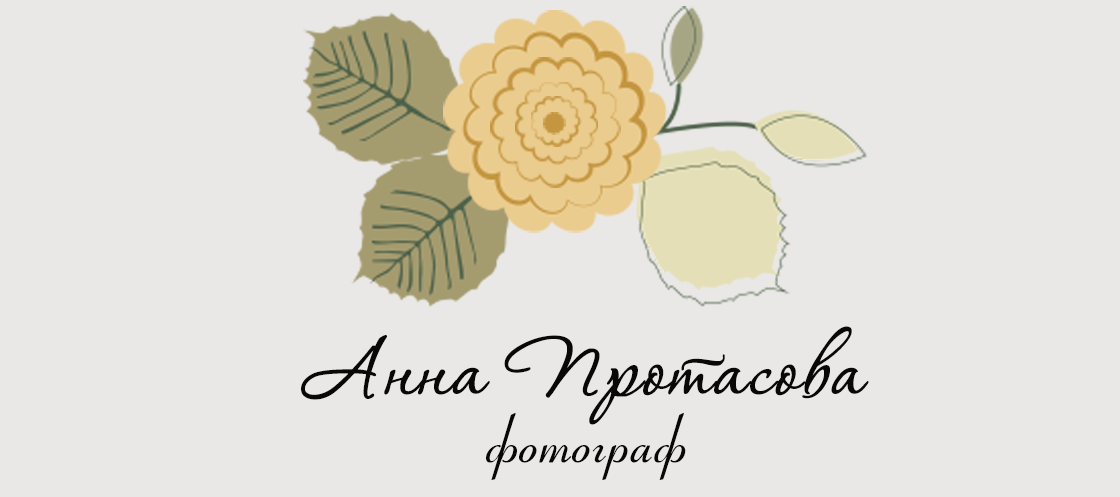
<style>
.page{position:relative;width:1120px;height:497px;background:#e9e8e6}
.page>*{position:absolute;margin:0}
.t1{font:99px "Corinthia";color:#090808;font-weight:bold;scale:1.09 1}
.t2{font:72px "Coronet";color:#090808}
</style>
<div class="page">
<p class="t1" style="left:301px;top:326px;width:568px;height:99px">Анна Протасова</p>
<p class="t2" style="left:486px;top:413px;width:200px;height:67px">фотограф</p>
</div>
